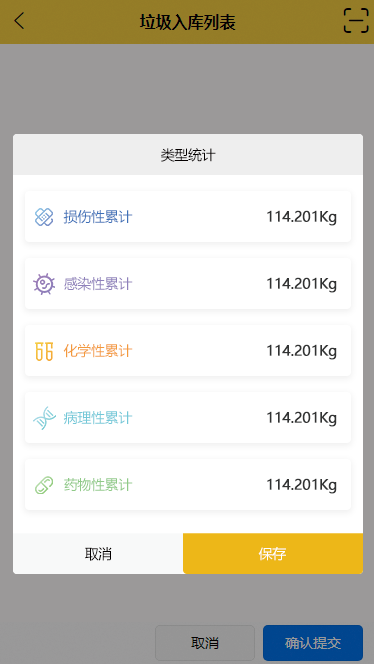
<style>
.page{position:relative;width:374px;height:664px;background:#ffffff}
.page>*{position:absolute;margin:0}
.t1{font:14px "MicrosoftYaHei";letter-spacing:-0.02em;color:#040000}
.t2{font:14px "MicrosoftYaHei";letter-spacing:-0.02em;color:#3f71b8}
.t3{font:14px "MicrosoftYaHei";letter-spacing:-0.02em;color:#323333;font-weight:bold}
.t4{font:14px "MicrosoftYaHei";letter-spacing:-0.02em;color:#8f81bb}
.t5{font:14px "MicrosoftYaHei";letter-spacing:-0.02em;color:#f39a3c}
.t6{font:14px "MicrosoftYaHei";letter-spacing:-0.02em;color:#73c8d8}
.t7{font:14px "MicrosoftYaHei";letter-spacing:-0.02em;color:#90ca88}
.t8{font:14px "MicrosoftYaHei";letter-spacing:-0.02em;color:#ffffff}
</style>
<div class="page">
<p class="t1" style="left:161px;top:148px;width:55px;height:14px">类型统计</p>
<p class="t2" style="left:63px;top:210px;width:70px;height:14px">损伤性累计</p>
<p class="t3" style="left:267px;top:210px;width:70px;height:16px">114.201Kg</p>
<p class="t4" style="left:64px;top:276px;width:69px;height:15px">感染性累计</p>
<p class="t3" style="left:267px;top:277px;width:70px;height:16px">114.201Kg</p>
<p class="t5" style="left:63px;top:343px;width:70px;height:15px">化学性累计</p>
<p class="t3" style="left:267px;top:344px;width:70px;height:16px">114.201Kg</p>
<p class="t6" style="left:63px;top:410px;width:70px;height:15px">病理性累计</p>
<p class="t3" style="left:267px;top:411px;width:70px;height:16px">114.201Kg</p>
<p class="t7" style="left:64px;top:478px;width:69px;height:14px">药物性累计</p>
<p class="t3" style="left:267px;top:478px;width:70px;height:16px">114.201Kg</p>
<p class="t1" style="left:85px;top:547px;width:27px;height:14px">取消</p>
<p class="t8" style="left:258px;top:547px;width:28px;height:14px">保存</p>
</div>
